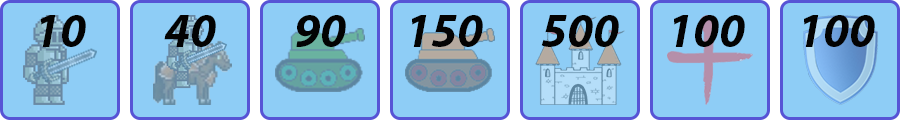
<style>
.page{position:relative;width:900px;height:120px;background:#8ecdf6}
.page>*{position:absolute;margin:0}
.t1{font:48px "MyriadPro-BoldIt";color:#030303}
</style>
<div class="page">
<p class="t1" style="left:41px;top:15px;width:45px;height:32px">10</p>
<p class="t1" style="left:164px;top:15px;width:52px;height:32px">40</p>
<p class="t1" style="left:296px;top:15px;width:50px;height:32px">90</p>
<p class="t1" style="left:412px;top:15px;width:71px;height:32px">150</p>
<p class="t1" style="left:541px;top:15px;width:78px;height:32px">500</p>
<p class="t1" style="left:674px;top:15px;width:71px;height:32px">100</p>
<p class="t1" style="left:804px;top:15px;width:71px;height:32px">100</p>
</div>
